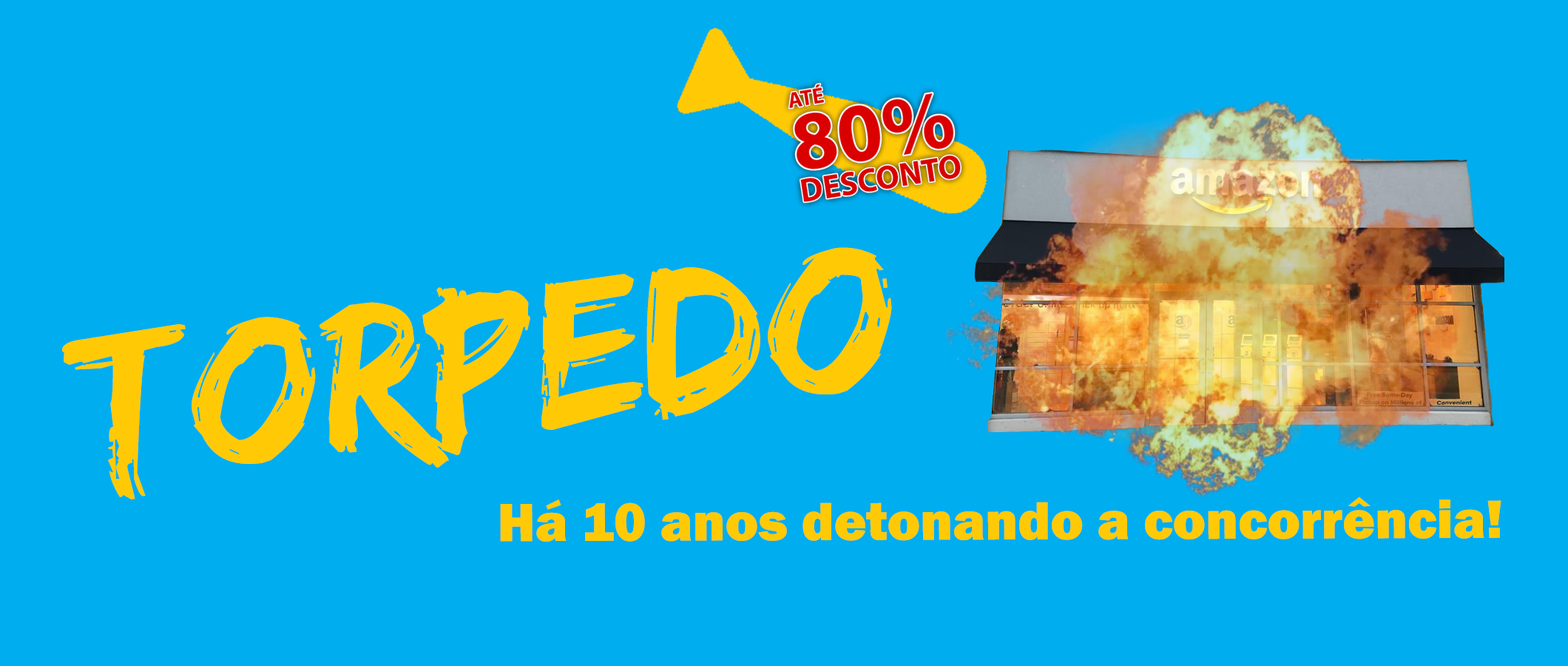
<style>
.page{position:relative;width:1568px;height:666px;background:#00adef}
.page>*{position:absolute;margin:0}
.t1{font:184.9px "Edo";color:#ffca05}
.t2{font:55.5px "FranklinGothic-Heavy";color:#ffca05}
</style>
<div class="page">
<p class="t1" style="left:62px;top:247px;width:830px;height:252px;rotate:-7deg">Torpedo</p>
<p class="t2" style="left:500px;top:496px;width:1001px;height:45px">Há 10 anos detonando a concorrência!</p>
</div>
